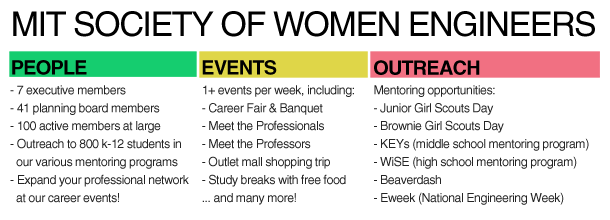
<style>
.page{position:relative;width:610px;height:220px;background:#ffffff}
.page>*{position:absolute;margin:0}
.t1{font:34px "HelveticaLTStd-Roman";letter-spacing:-0.04em;color:#000000}
.t2{font:20px "HelveticaLTStd-Bold";letter-spacing:-0.04em;color:#000000}
.t3{font:12.5px/18px "HelveticaLTStd-Roman";letter-spacing:-0.04em;color:#242424}
</style>
<div class="page">
<p class="t1" style="left:13px;top:11px;width:582px;height:26px">MIT SOCIETY OF WOMEN ENGINEERS</p>
<p class="t2" style="left:12px;top:60px;width:75px;height:15px">PEOPLE</p>
<p class="t2" style="left:202px;top:60px;width:75px;height:15px">EVENTS</p>
<p class="t2" style="left:374px;top:60px;width:106px;height:15px">OUTREACH</p>
<p class="t3" style="left:10px;top:85px;width:179px;height:118px">- 7 executive members<br>- 41 planning board members<br>- 100 active members at large<br>- Outreach to 800 k-12 students in              our various mentoring programs<br>- Expand your professional network      at our career events!</p>
<p class="t3" style="left:202px;top:85px;width:152px;height:120px">1+ events per week, including:<br>- Career Fair &amp; Banquet<br>- Meet the Professionals<br>- Meet the Professors<br>- Outlet mall shopping trip<br>- Study breaks with free food<br>... and many more!</p>
<p class="t3" style="left:374px;top:85px;width:215px;height:120px">Mentoring opportunities:<br>- Junior Girl Scouts Day<br>- Brownie Girl Scouts Day<br>- KEYs (middle school mentoring program)<br>- WiSE (high school mentoring program)<br>- Beaverdash<br>- Eweek (National Engineering Week)</p>
</div>
